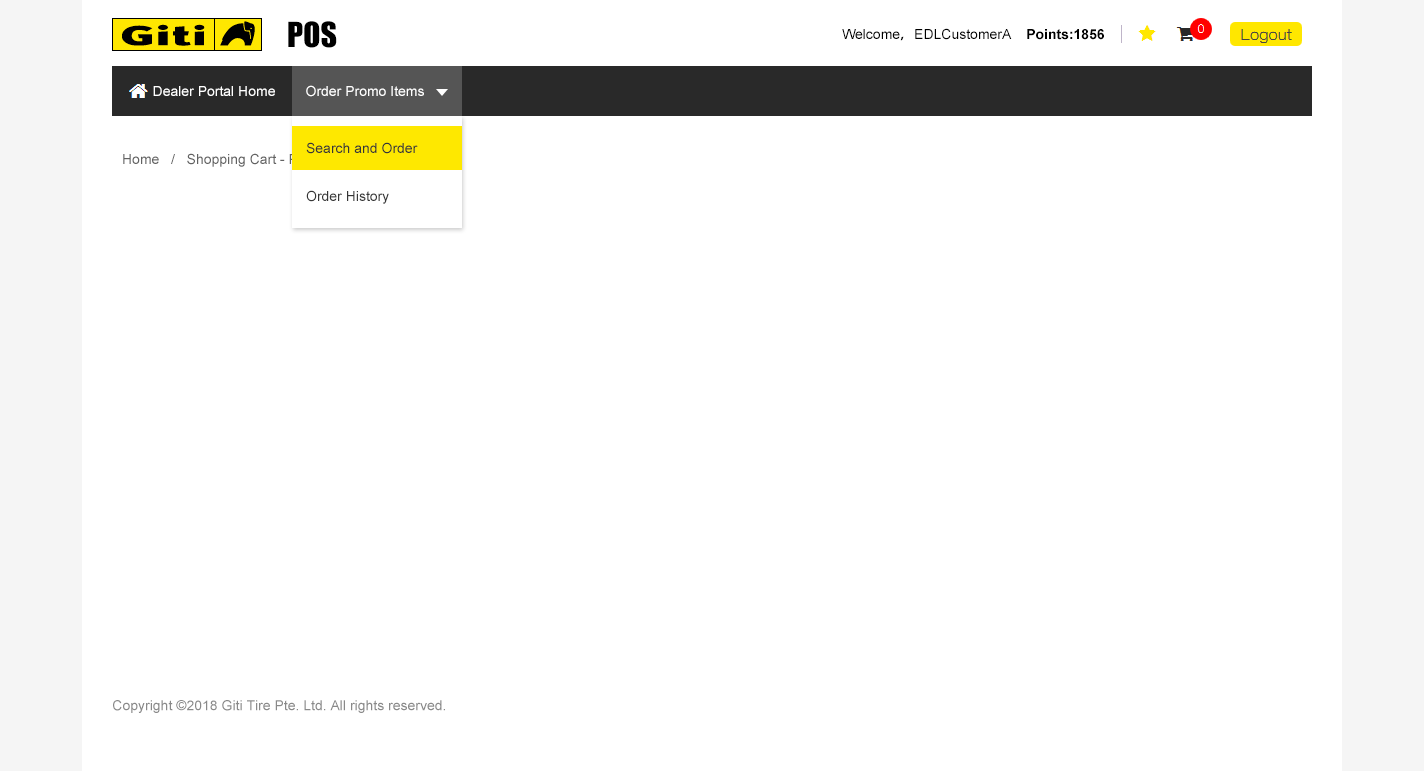
<style>
.page{position:relative;width:1424px;height:771px;background:#ffffff}
.page>*{position:absolute;margin:0}
.t1{font:32px "Impact";color:#000000}
.t2{font:14px "ArialMT";color:#000000}
.t3{font:14px "AdobeHeitiStd-Regular";color:#000000}
.t4{font:14px "Arial-BoldMT";color:#000000}
.t5{font:14px "ArialMT";color:#ffffff}
.t6{font:14px/48px "ArialMT";color:#363636}
.t7{font:14px "ArialMT";color:#626262}
.t8{font:14px "ArialMT";color:#898989}
</style>
<div class="page">
<p class="t1" style="left:288px;top:21px;width:49px;height:27px">POS</p>
<p class="t2" style="left:842px;top:28px;width:262px;height:13px">Welcome<span class="t3">，</span>EDLCustomerA    <span class="t4">Points:1856</span></p>
<p class="t5" style="left:153px;top:86px;width:122px;height:10px">Dealer Portal Home</p>
<p class="t5" style="left:306px;top:85px;width:118px;height:12px">Order Promo Items</p>
<p class="t5" style="left:306px;top:85px;width:118px;height:12px">Order Promo Items</p>
<p class="t6" style="left:306px;top:142px;width:112px;height:62px">Search and Order<br>Order History</p>
<p class="t7" style="left:123px;top:153px;width:204px;height:14px">Home   /   Shopping Cart - Points</p>
<p class="t8" style="left:113px;top:700px;width:332px;height:13px">Copyright ©2018 Giti Tire Pte. Ltd. All rights reserved.</p>
</div>
